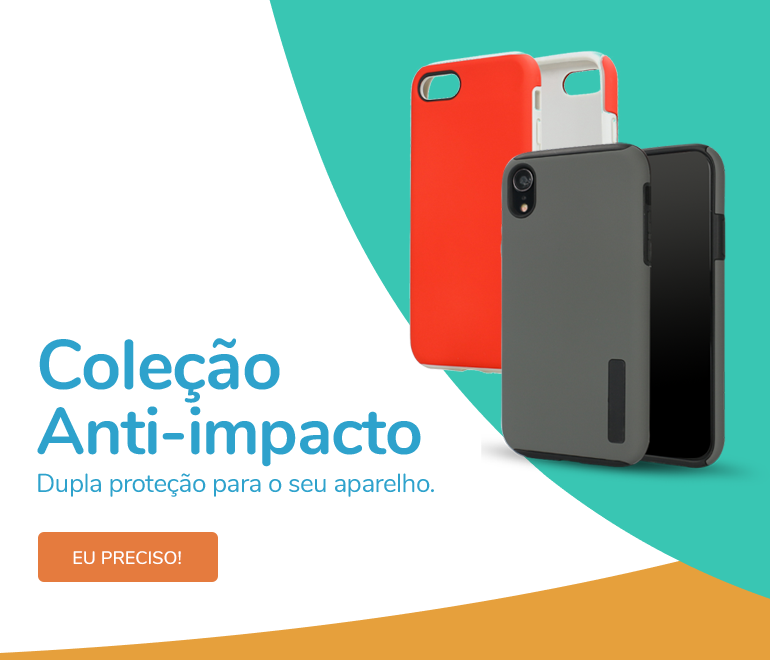
<style>
.page{position:relative;width:770px;height:660px;background:#ffffff}
.page>*{position:absolute;margin:0}
.t1{font:66px/65px "Nunito-Bold";letter-spacing:-0.02em;color:#2ea2cc}
.t2{font:70px/65px "Nunito-Bold";letter-spacing:-0.02em;color:#2ea2cc}
.t3{font:26px "Nunito-Regular";letter-spacing:-0.02em;color:#2ea2cc}
.t4{font:18px "Nunito-SemiBold";color:#ffffff}
</style>
<div class="page">
<p class="t1" style="left:37px;top:338px;width:384px;height:129px"><span class="t2">Coleção</span><br>Anti-impacto</p>
<p class="t3" style="left:38px;top:473px;width:396px;height:24px">Dupla proteção para o seu aparelho.</p>
<p class="t4" style="left:73px;top:551px;width:108px;height:14px">EU PRECISO!</p>
</div>
